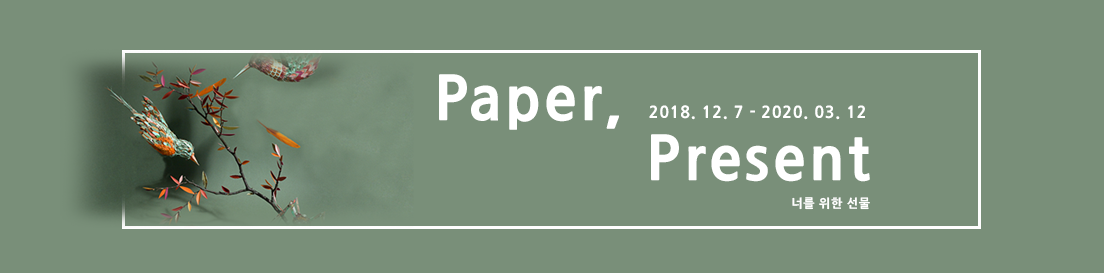
<style>
.page{position:relative;width:1104px;height:273px;background:#798f79}
.page>*{position:absolute;margin:0}
.t1{font:16px/60px "NanumGothicExtraBold";letter-spacing:0.05em;color:#ffffff}
.t2{font:60px/60px "NanumGothicExtraBold";letter-spacing:0.05em;color:#ffffff}
.t3{font:12px "NanumGothicExtraBold";letter-spacing:0.05em;color:#ffffff}
</style>
<div class="page">
<p class="t1" style="left:439px;top:74px;width:431px;height:108px;text-align:center"><span class="t2">Paper, </span>2018. 12. 7 - 2020. 03. 12<br>        <span class="t2">Present</span></p>
<p class="t3" style="left:792px;top:197px;width:78px;height:13px">너를 위한 선물</p>
</div>
